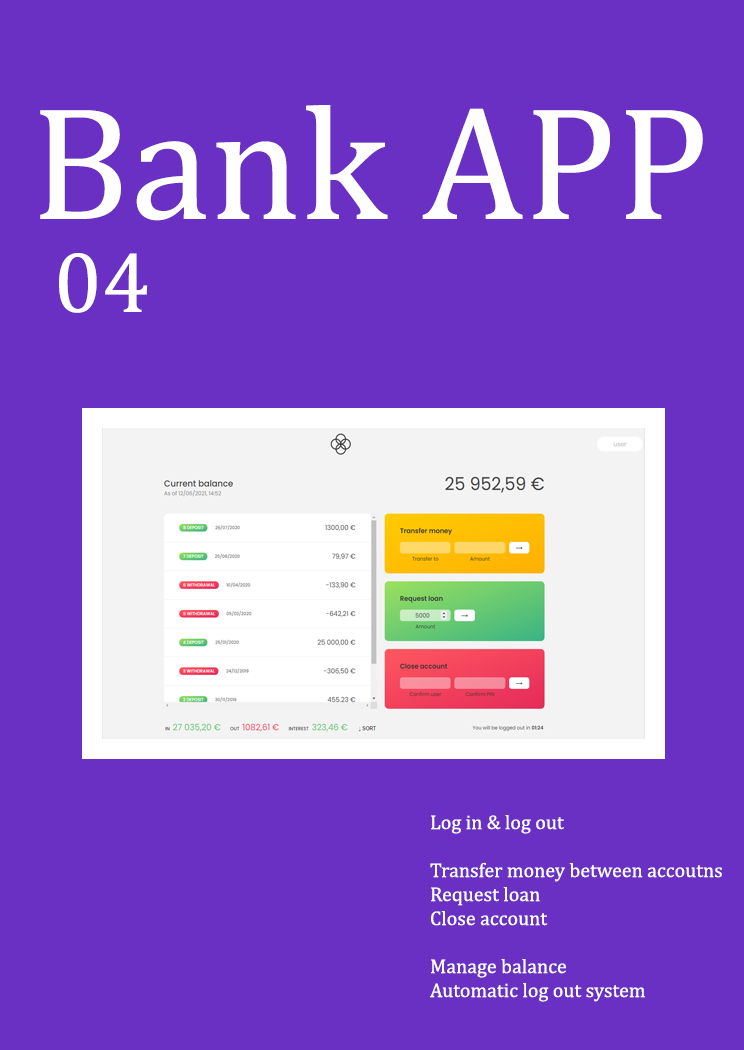
<style>
.page{position:relative;width:744px;height:1050px;background:#6930c3}
.page>*{position:absolute;margin:0}
.t1{font:163px "Cambria";color:#ffffff}
.t2{font:87.3px "Cambria";color:#ffffff}
.t3{font:20px "Cambria";color:#ffffff}
</style>
<div class="page">
<p class="t1" style="left:40px;top:105px;width:663px;height:116px">Bank APP</p>
<p class="t2" style="left:59px;top:253px;width:89px;height:60px">04</p>
<p class="t3" style="left:430px;top:815px;width:292px;height:187px">Log in &amp; log out<br><br>Transfer money between accoutns<br>Request loan<br>Close account<br><br>Manage balance <br>Automatic log out system</p>
</div>
